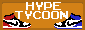
<style>
.page{position:relative;width:85px;height:30px;background:#d38116}
.page>*{position:absolute;margin:0}
.t1{font:16px "ArcadeClassic";color:#ffffff}
</style>
<div class="page">
<p class="t1" style="left:26px;top:2px;width:35px;height:8px">HYPE</p>
<p class="t1" style="left:15px;top:11px;width:53px;height:8px">TYCOON</p>
</div>
